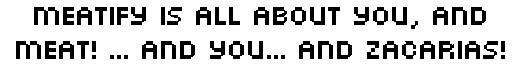
<style>
.page{position:relative;width:512px;height:64px;background:#ffffff}
.page>*{position:absolute;margin:0}
.t1{font:28px "PFArmaFive";color:#000000}
</style>
<div class="page">
<p class="t1" style="left:16px;top:7px;width:489px;height:52px;text-align:center">meatify is all about you, and meat! ... and you... and zacarias!</p>
</div>
